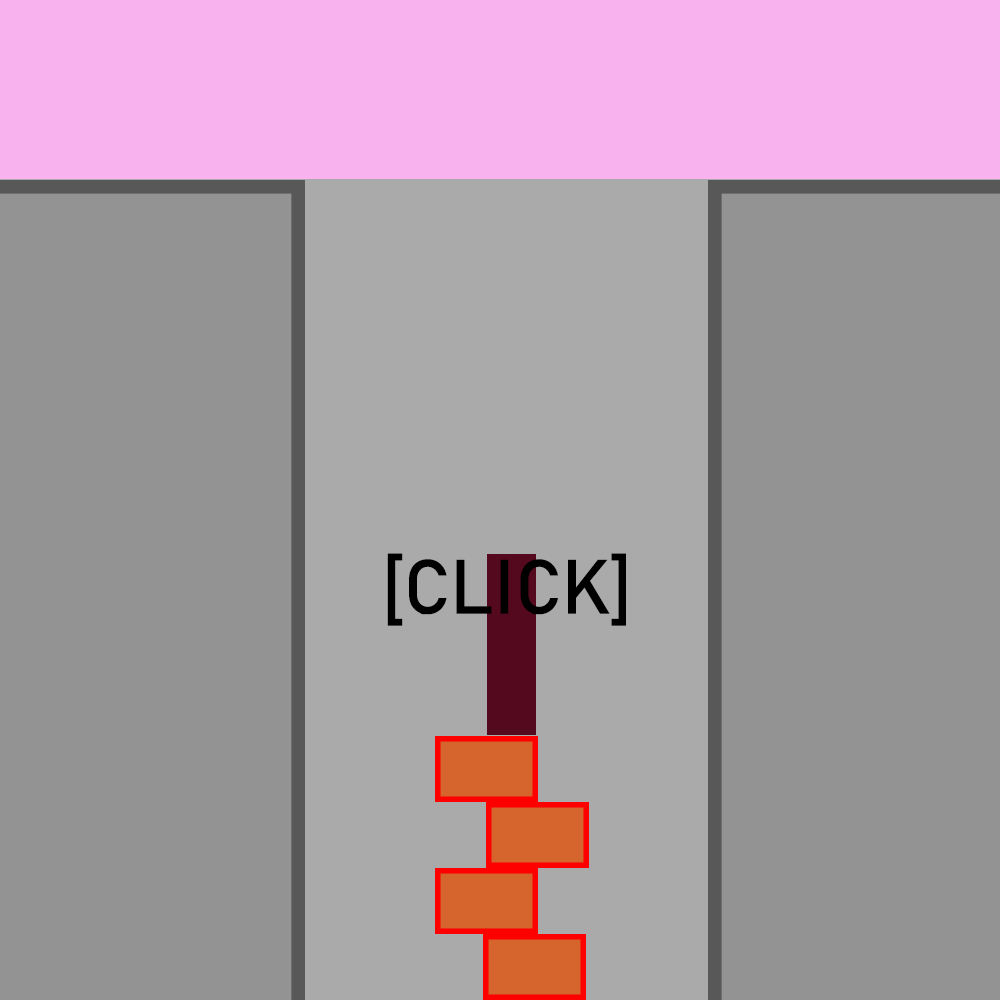
<style>
.page{position:relative;width:1000px;height:1000px;background:#939393}
.page>*{position:absolute;margin:0}
.t1{font:129.9px "Bahnschrift";letter-spacing:0.005em;color:#000000}
</style>
<div class="page">
<p class="t1" style="left:387px;top:553px;width:239px;height:73px">[CLICK]</p>
</div>
